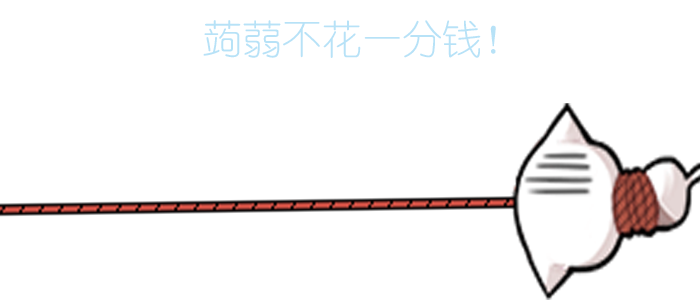
<style>
.page{position:relative;width:700px;height:300px;background:#ffffff}
.page>*{position:absolute;margin:0}
.t1{font:40.1px "YouYuan";color:#b7e2f7}
</style>
<div class="page">
<p class="t1" style="left:203px;top:20px;width:293px;height:38px">蒟蒻不花一分钱！</p>
</div>
